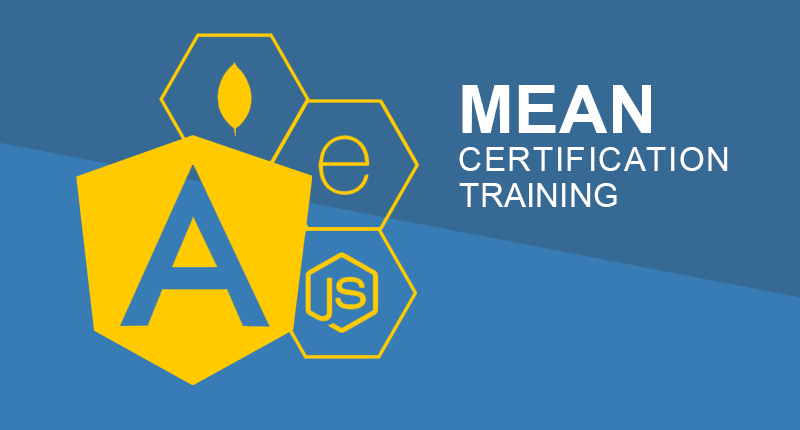
<style>
.page{position:relative;width:800px;height:430px;background:#366994}
.page>*{position:absolute;margin:0}
.t1{font:66.7px "Arial-BoldMT";letter-spacing:0.01em;color:#ffffff}
.t2{font:33.3px "ArialMT";letter-spacing:0.05em;color:#ffffff}
.t3{font:33.3px "ArialMT";color:#ffffff}
</style>
<div class="page">
<p class="t1" style="left:462px;top:85px;width:189px;height:48px">MEAN</p>
<p class="t2" style="left:459px;top:147px;width:269px;height:24px">CERTIFICATION</p>
<p class="t3" style="left:459px;top:183px;width:158px;height:24px">TRAINING</p>
</div>
